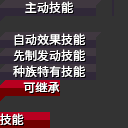
<style>
.page{position:relative;width:128px;height:128px;background:#333333}
.page>*{position:absolute;margin:0}
.t1{font:12px/16px "SourceHanSansSC-Regular";color:#ffffff}
.t2{font:12px/32px "SourceHanSansSC-Regular";color:#ffffff}
.t3{font:12px "SourceHanSansSC-Regular";color:#ffffff}
</style>
<div class="page">
<p class="t1" style="left:13px;top:1px;width:72px;height:76px;text-align:center"><span class="t2">主动技能<br></span>自动效果技能<br>先制发动技能<br>种族特有技能</p>
<p class="t3" style="left:23px;top:82px;width:37px;height:11px">可继承</p>
<p class="t3" style="left:0px;top:113px;width:24px;height:12px">技能</p>
</div>
